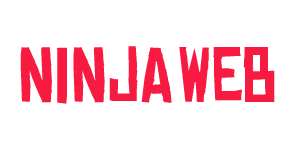
<style>
.page{position:relative;width:300px;height:150px;background:#ffffff}
.page>*{position:absolute;margin:0}
.t1{font:75px "ChineseRocksRg-Regular";color:#f81b41;text-transform:uppercase}
</style>
<div class="page">
<p class="t1" style="left:20px;top:46px;width:152px;height:58px">NINJA</p>
<p class="t1" style="left:179px;top:47px;width:96px;height:55px">web</p>
</div>
